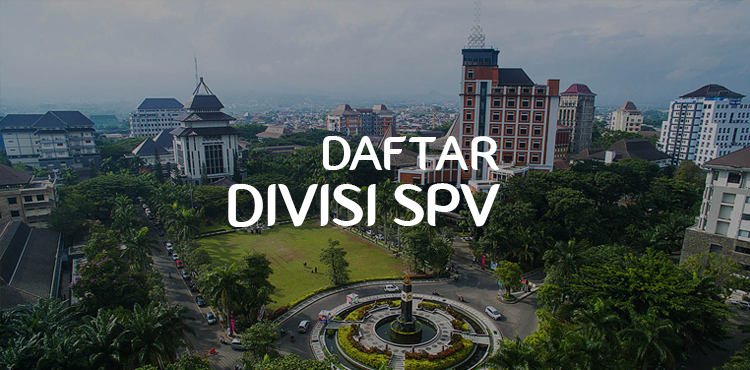
<style>
.page{position:relative;width:750px;height:370px}
.page>*{position:absolute;margin:0}
.t1{font:48px "Fontastique-Fontastique";color:#ffffff}
.t2{font:60px "Fontastique-Fontastique";color:#ffffff}
</style>
<div class="page">
<p class="t1" style="left:322px;top:136px;width:178px;height:34px">DAFTAR</p>
<p class="t2" style="left:228px;top:183px;width:272px;height:44px">DIVISI SPV</p>
</div>
